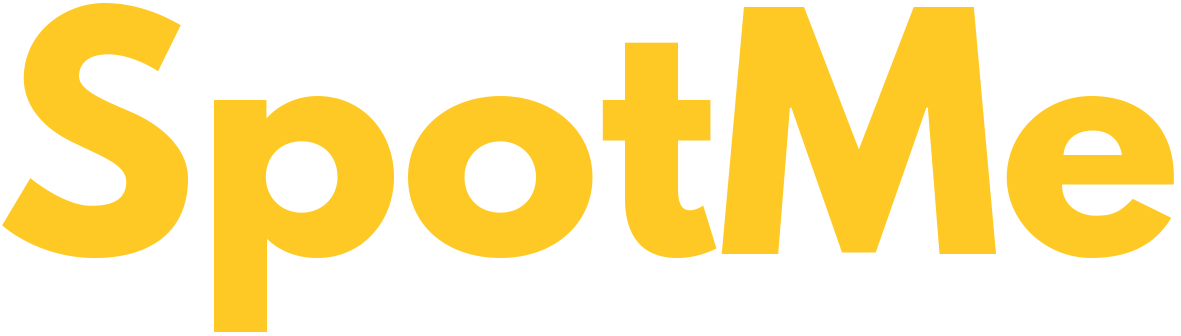
<style>
.page{position:relative;width:1181px;height:336px;background:#ffffff}
.page>*{position:absolute;margin:0}
.t1{font:300px "LeagueSpartan-Bold";color:#fec925}
</style>
<div class="page">
<p class="t1" style="left:2px;top:3px;width:1172px;height:329px">SpotMe</p>
</div>
